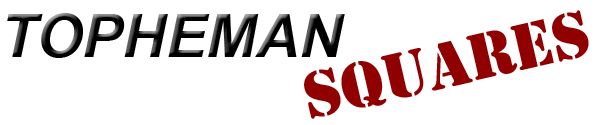
<style>
.page{position:relative;width:600px;height:125px;background:#ffffff}
.page>*{position:absolute;margin:0}
.t1{font:60px "Arial-BoldItalicMT";color:#000000}
.t2{font:60px "StencilStd";color:#900000}
</style>
<div class="page">
<p class="t1" style="left:7px;top:13px;width:338px;height:45px">TOPHEMAN</p>
<p class="t2" style="left:304px;top:10px;width:285px;height:109px;rotate:-13deg">SQUARES</p>
</div>
